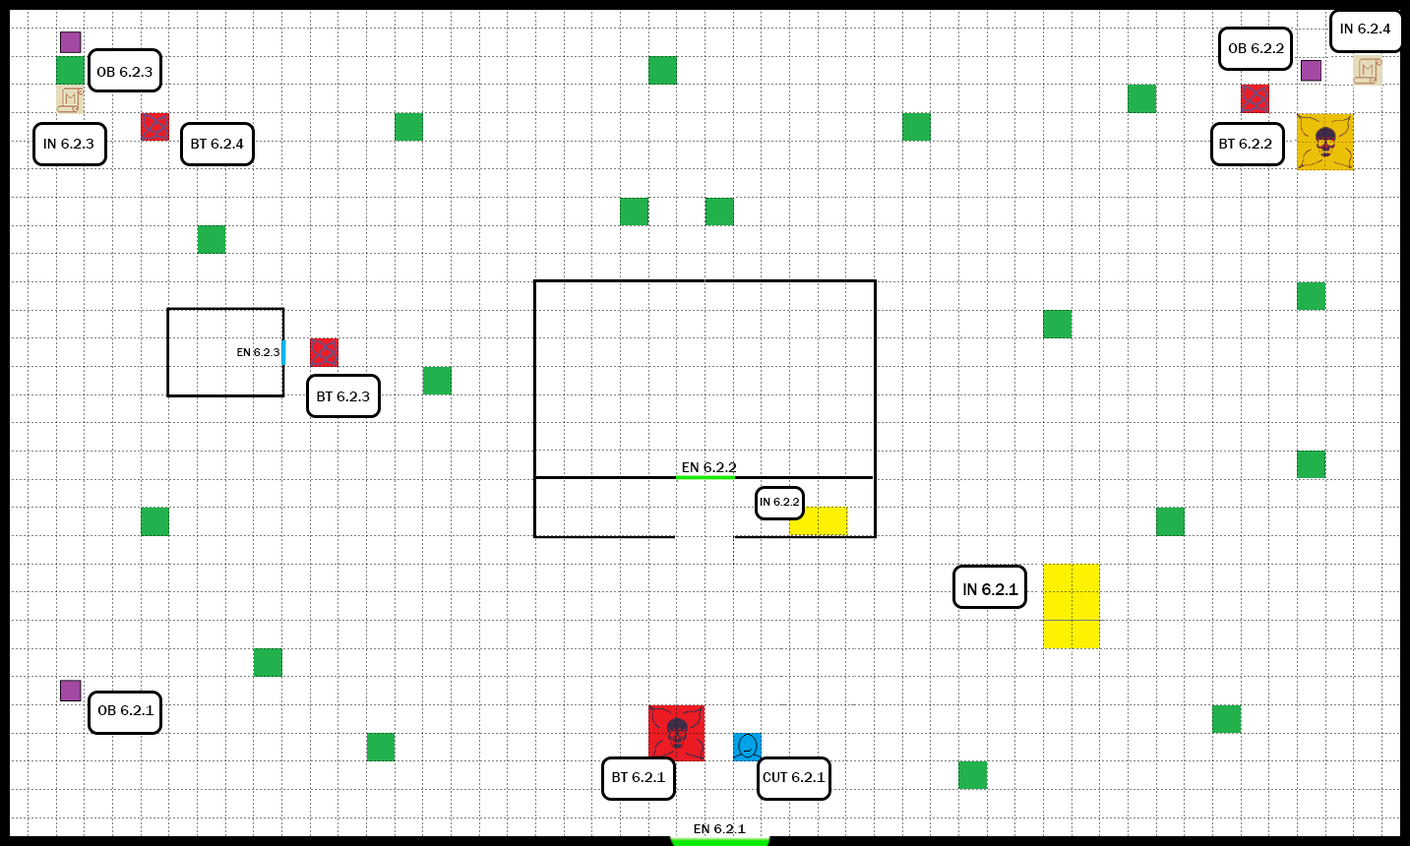
<style>
.page{position:relative;width:1410px;height:846px;background:#ffffff}
.page>*{position:absolute;margin:0}
.t1{font:15.1px "FranklinGothic-Medium";color:#000000}
.t2{font:11.7px "FranklinGothic-Medium";color:#000000}
.t3{font:16.3px "FranklinGothic-Medium";color:#000000}
.t4{font:14.2px "FranklinGothic-Medium";color:#000000}
</style>
<div class="page">
<p class="t1" style="left:1340px;top:24px;width:51px;height:9px">IN 6.2.4</p>
<p class="t1" style="left:1228px;top:43px;width:56px;height:10px">OB 6.2.2</p>
<p class="t1" style="left:96px;top:67px;width:56px;height:10px">OB 6.2.3</p>
<p class="t1" style="left:43px;top:139px;width:51px;height:10px">IN 6.2.3</p>
<p class="t1" style="left:191px;top:139px;width:53px;height:10px">BT 6.2.4</p>
<p class="t1" style="left:1219px;top:139px;width:53px;height:10px">BT 6.2.2</p>
<p class="t2" style="left:237px;top:348px;width:42px;height:8px">EN 6.2.3</p>
<p class="t1" style="left:317px;top:391px;width:53px;height:10px">BT 6.2.3</p>
<p class="t1" style="left:682px;top:462px;width:55px;height:10px">EN 6.2.2</p>
<p class="t2" style="left:759px;top:498px;width:40px;height:8px">IN 6.2.2</p>
<p class="t3" style="left:963px;top:583px;width:55px;height:12px">IN 6.2.1</p>
<p class="t1" style="left:97px;top:705px;width:57px;height:10px">OB 6.2.1</p>
<p class="t1" style="left:612px;top:772px;width:53px;height:10px">BT 6.2.1</p>
<p class="t1" style="left:762px;top:772px;width:63px;height:10px">CUT 6.2.1</p>
<p class="t4" style="left:693px;top:824px;width:53px;height:9px">EN 6.2.1</p>
</div>
